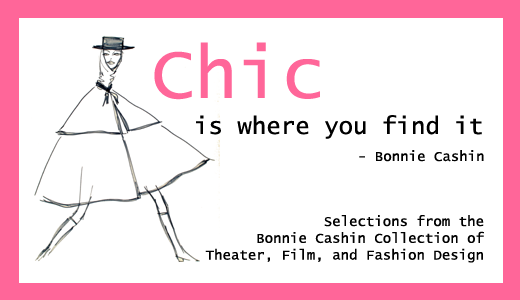
<style>
.page{position:relative;width:520px;height:300px;background:#ffffff}
.page>*{position:absolute;margin:0}
.t1{font:72px "LucidaConsole";color:#ff6699}
.t2{font:24px "LucidaConsole";color:#000000}
.t3{font:14px "LucidaConsole";color:#000000}
</style>
<div class="page">
<p class="t1" style="left:154px;top:42px;width:166px;height:58px">Chic</p>
<p class="t2" style="left:196px;top:115px;width:286px;height:24px">is where you find it</p>
<p class="t3" style="left:359px;top:150px;width:125px;height:12px">- Bonnie Cashin</p>
<p class="t3" style="left:205px;top:215px;width:279px;height:48px;text-align:right">Selections from the<br>Bonnie Cashin Collection of<br>Theater, Film, and Fashion Design</p>
</div>
